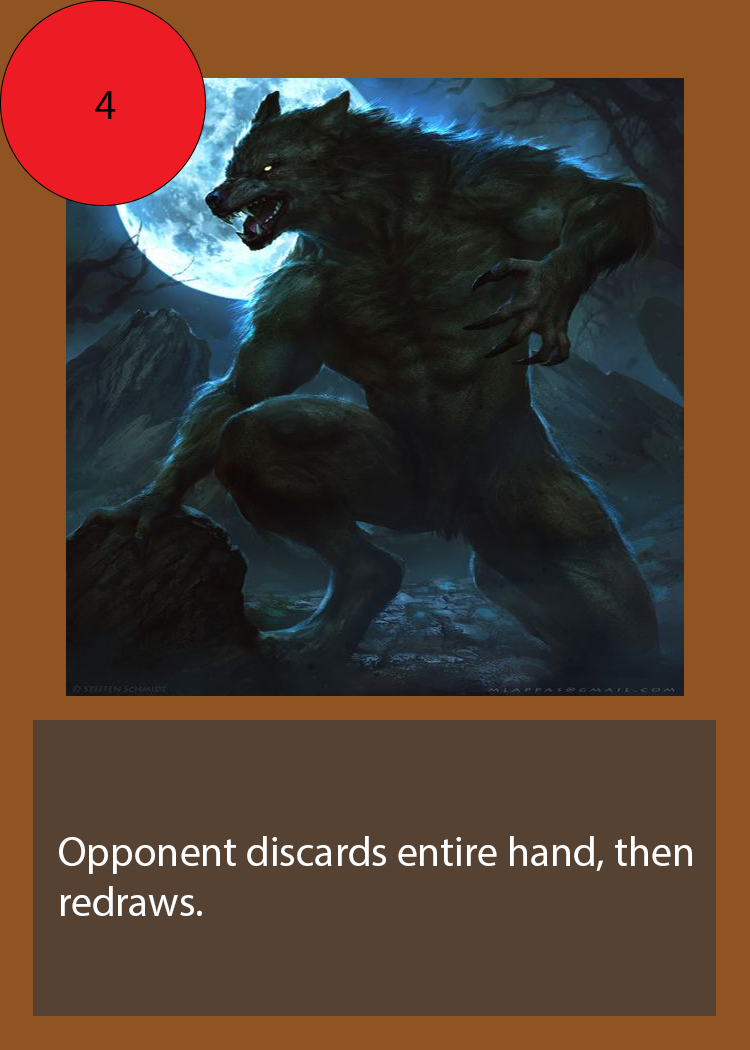
<style>
.page{position:relative;width:750px;height:1050px;background:#905322}
.page>*{position:absolute;margin:0}
.t1{font:41.7px "MyriadPro-Regular";color:#000000}
.t2{font:41.7px "MyriadPro-Regular";color:#ffffff}
</style>
<div class="page">
<p class="t1" style="left:95px;top:91px;width:21px;height:28px">4</p>
<p class="t2" style="left:59px;top:836px;width:633px;height:80px">Opponent discards entire hand, then<br>redraws.</p>
</div>
